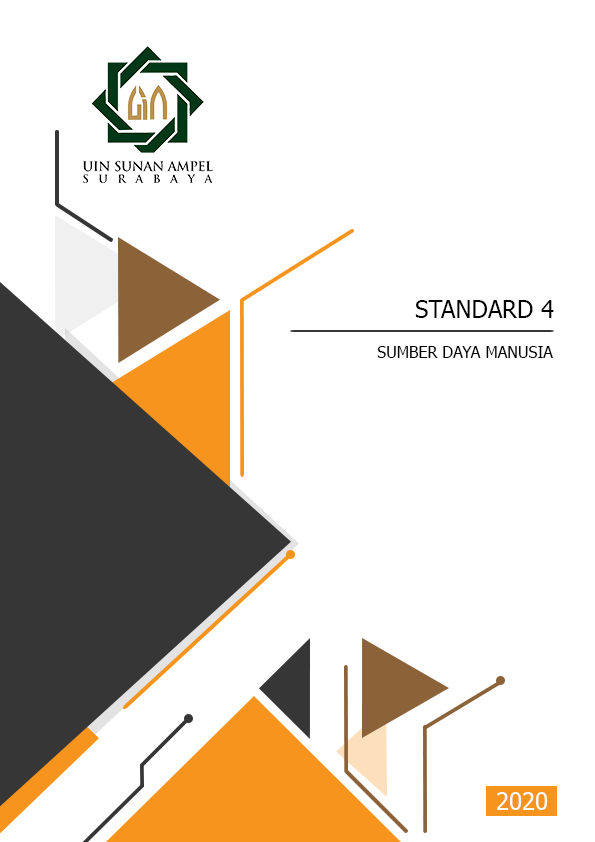
<style>
.page{position:relative;width:595px;height:842px;background:#ffffff}
.page>*{position:absolute;margin:0}
.t1{font:24px "Tahoma";color:#000000}
.t2{font:16px "Tahoma";color:#000000}
.t3{font:24px "Tahoma";color:#fefefe}
</style>
<div class="page">
<p class="t1" style="left:415px;top:300px;width:139px;height:18px">STANDARD 4</p>
<p class="t2" style="left:377px;top:346px;width:176px;height:12px">SUMBER DAYA MANUSIA</p>
<p class="t3" style="left:497px;top:792px;width:51px;height:18px">2020</p>
</div>
